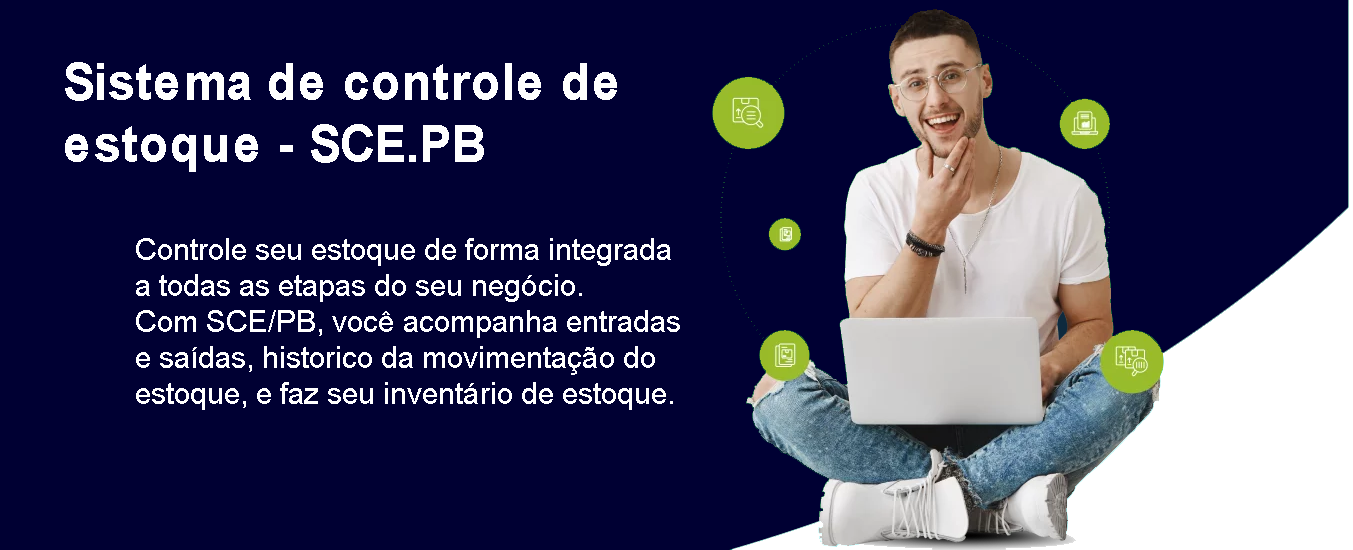
<style>
.page{position:relative;width:1353px;height:550px;background:#000033}
.page>*{position:absolute;margin:0}
.t1{font:52px "Arial-BoldMT";color:#ffffff;scale:0.93 1}
.t2{font:30px "ArialMT";color:#ffffff}
</style>
<div class="page">
<p class="t1" style="left:65px;top:62px;width:552px;height:110px">Sistema de controle de<br>estoque - SCE.PB</p>
<p class="t2" style="left:136px;top:238px;width:544px;height:172px">Controle seu estoque de forma integrada <br>a todas as etapas do seu negócio. <br>Com SCE/PB, você acompanha entradas <br>e saídas, historico da movimentação do  <br>estoque, e faz seu inventário de estoque.</p>
</div>
